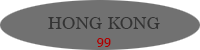
<style>
.page{position:relative;width:200px;height:50px;background:#717171}
.page>*{position:absolute;margin:0}
.t1{font:17.7px "Marion-Regular";color:#343434}
.t2{font:14px "Marion-Regular";color:#ac0000}
</style>
<div class="page">
<p class="t1" style="left:48px;top:17px;width:112px;height:12px">HONG KONG</p>
<p class="t2" style="left:97px;top:38px;width:14px;height:9px">99</p>
</div>
